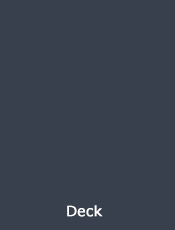
<style>
.page{position:relative;width:175px;height:230px;background:#38404d}
.page>*{position:absolute;margin:0}
.t1{font:14px "Verdana";color:#ffffff;font-weight:bold}
</style>
<div class="page">
<p class="t1" style="left:67px;top:205px;width:36px;height:12px">Deck</p>
</div>
